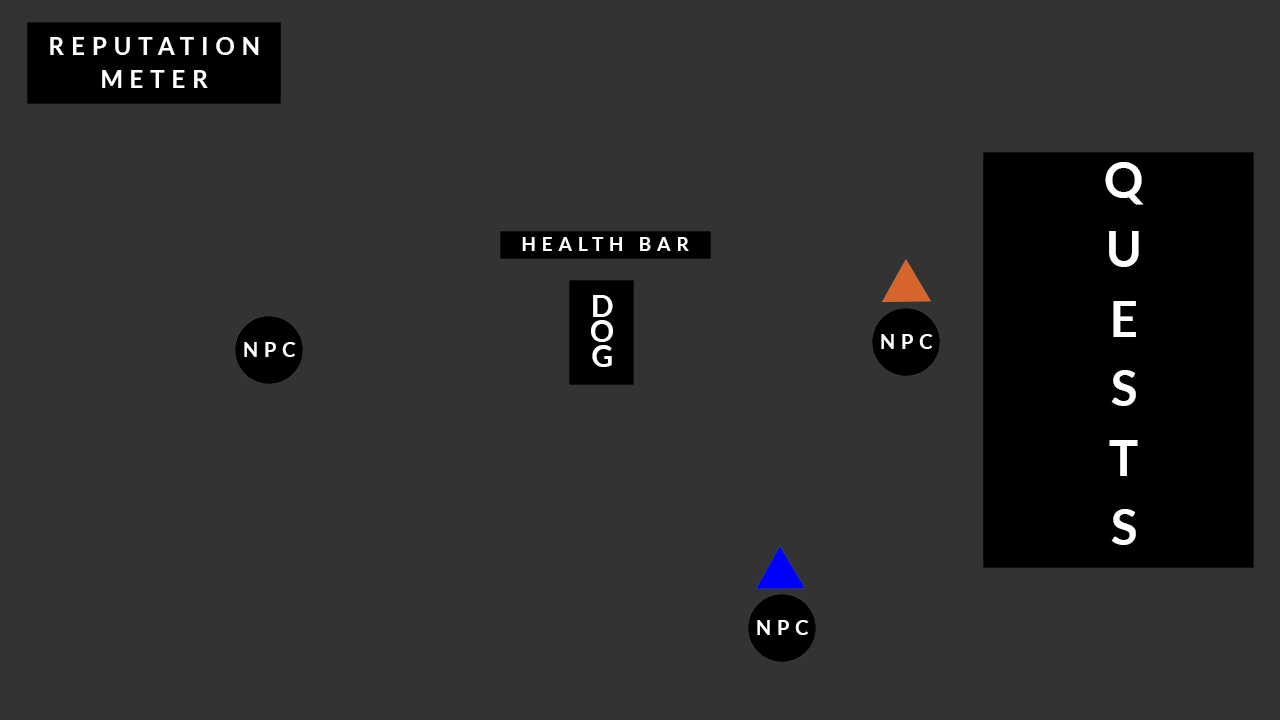
<style>
.page{position:relative;width:1280px;height:720px;background:#333333}
.page>*{position:absolute;margin:0}
.t1{font:23.7px/33.3px "Lato-Bold";letter-spacing:0.3em;color:#ffffff}
.t2{font:49.3px/69.4px "Lato-Bold";letter-spacing:0.3em;color:#ffffff}
.t3{font:19.2px "Lato-Bold";letter-spacing:0.3em;color:#ffffff}
.t4{font:29.6px/24.9px "Lato-Bold";letter-spacing:0.3em;color:#ffffff}
.t5{font:19.9px "Lato-Bold";letter-spacing:0.3em;color:#ffffff}
</style>
<div class="page">
<p class="t1" style="left:50px;top:37px;width:209px;height:51px;text-align:center">REPUTATION<br>METER</p>
<p class="t2" style="left:1105px;top:162px;width:39px;height:383px;text-align:center">Q<br>U<br>E<br>S<br>T<br>S</p>
<p class="t3" style="left:522px;top:237px;width:167px;height:14px">HEALTH BAR</p>
<p class="t4" style="left:591px;top:295px;width:22px;height:72px;text-align:center">D<br>O<br>G</p>
<p class="t5" style="left:244px;top:342px;width:52px;height:15px">NPC</p>
<p class="t5" style="left:881px;top:334px;width:52px;height:15px">NPC</p>
<p class="t5" style="left:757px;top:620px;width:52px;height:15px">NPC</p>
</div>
